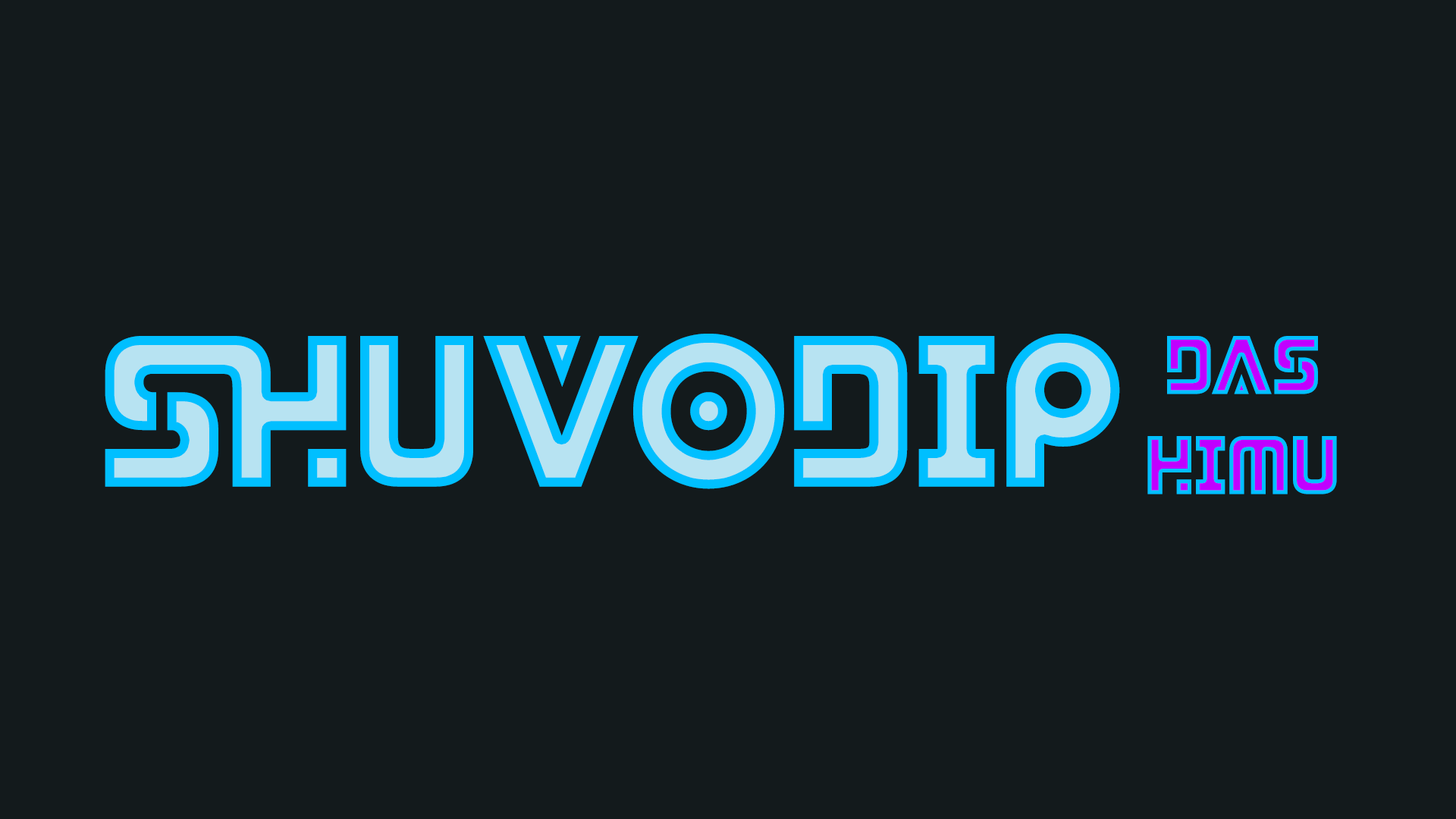
<style>
.page{position:relative;width:1456px;height:819px;background:#131a1c}
.page>*{position:absolute;margin:0}
.t1{font:217px "DendriticVoltage-Regular"}
.t2{font:83.4px "DendriticVoltage-Regular"}
</style>
<div class="page">
<p class="t1" style="left:105px;top:334px;width:1015px;height:155px">SHUVODIP</p>
<p class="t2" style="left:1147px;top:336px;width:190px;height:158px;text-align:center">DAS<br>HIMU</p>
</div>
